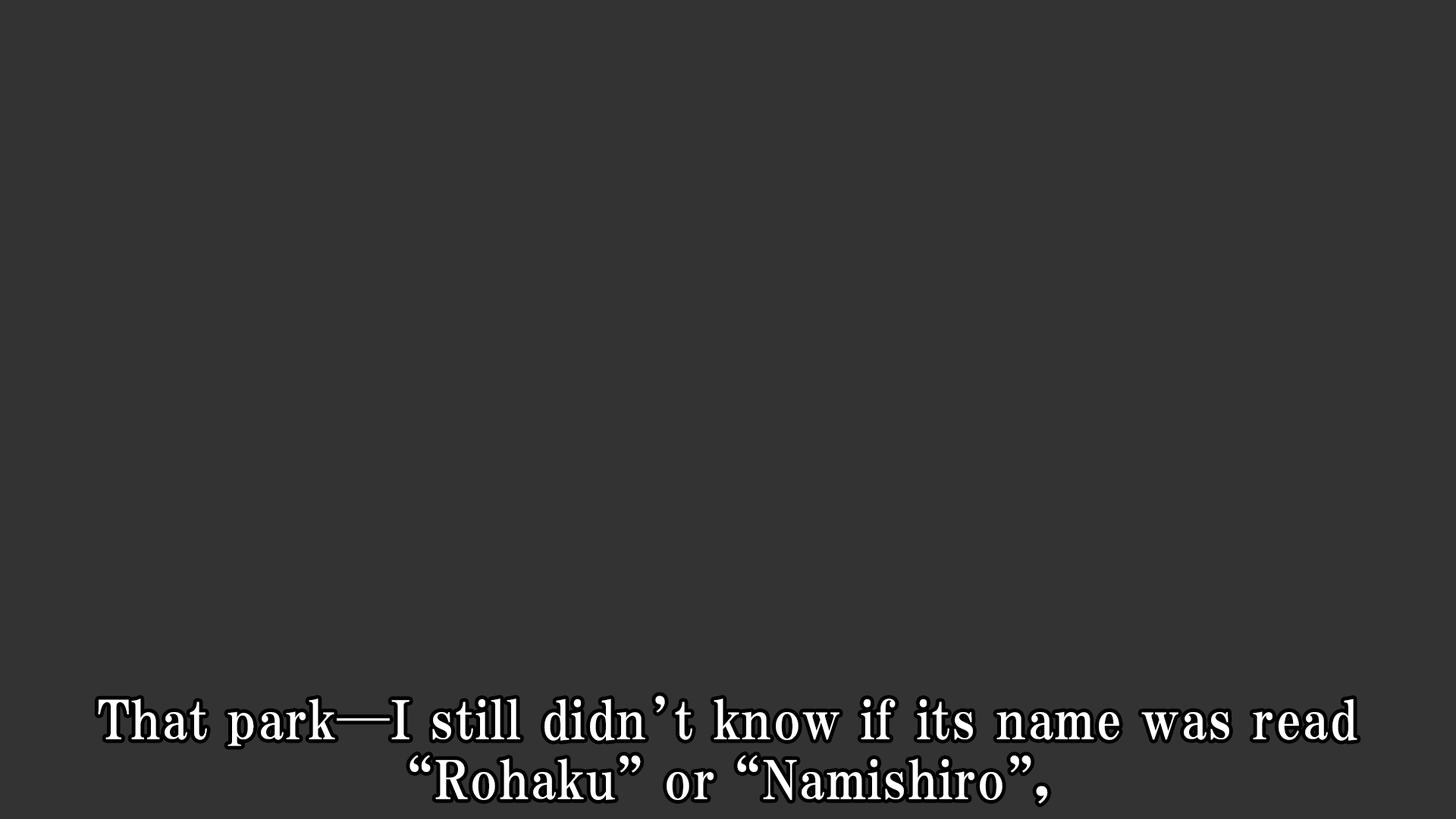
<style>
.page{position:relative;width:1456px;height:819px;background:#333333}
.page>*{position:absolute;margin:0}
.t1{font:53.1px/59.9px "HGPMinchoE";letter-spacing:0.025em;color:#ffffff}
</style>
<div class="page">
<p class="t1" style="left:98px;top:695px;width:1259px;height:109px;text-align:center">That park─I still didn’t know if its name was read<br>“Rohaku” or “Namishiro”,</p>
</div>
